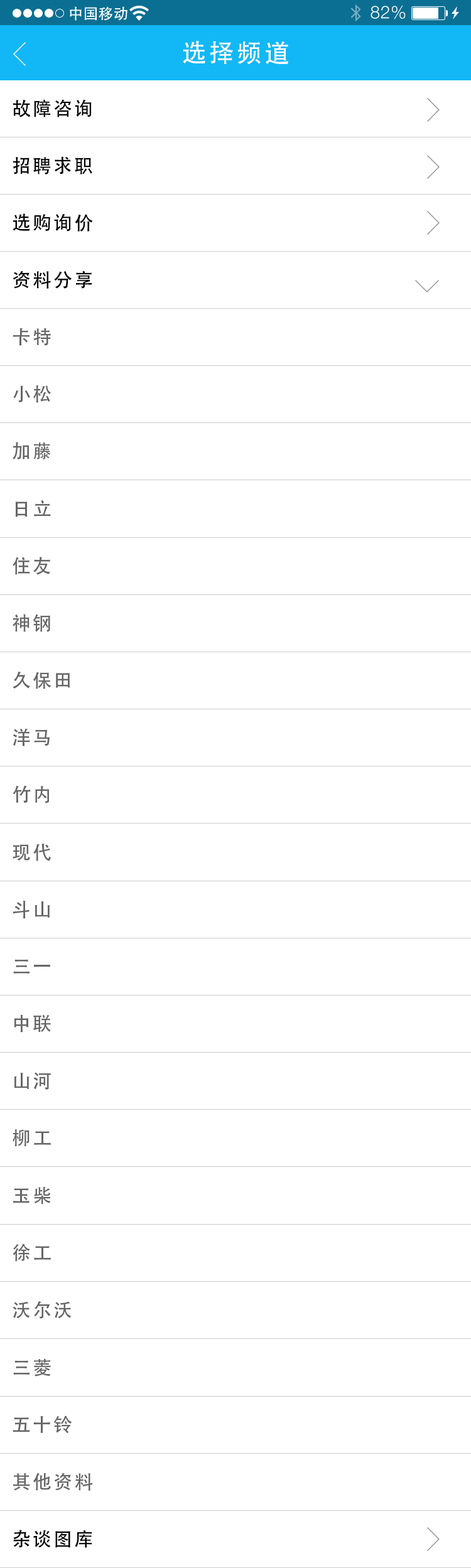
<style>
.page{position:relative;width:471px;height:1568px;background:#ffffff}
.page>*{position:absolute;margin:0}
.t1{font:25.1px "AdobeHeitiStd-Regular";letter-spacing:0.104em;color:#ffffff}
.t2{font:18.8px "AdobeHeitiStd-Regular";letter-spacing:0.104em;color:#000000}
.t3{font:18.8px "AdobeHeitiStd-Regular";letter-spacing:0.104em;color:#666666}
</style>
<div class="page">
<p class="t1" style="left:183px;top:41px;width:105px;height:24px">选择频道</p>
<p class="t2" style="left:13px;top:99px;width:79px;height:18px">故障咨询</p>
<p class="t2" style="left:13px;top:156px;width:79px;height:19px">招聘求职</p>
<p class="t2" style="left:13px;top:213px;width:80px;height:19px">选购询价</p>
<p class="t2" style="left:13px;top:271px;width:79px;height:18px">资料分享</p>
<p class="t3" style="left:13px;top:328px;width:38px;height:18px">卡特</p>
<p class="t3" style="left:13px;top:385px;width:38px;height:18px">小松</p>
<p class="t3" style="left:13px;top:442px;width:38px;height:17px">加藤</p>
<p class="t3" style="left:15px;top:500px;width:36px;height:17px">日立</p>
<p class="t3" style="left:13px;top:557px;width:37px;height:18px">住友</p>
<p class="t3" style="left:13px;top:614px;width:37px;height:18px">神钢</p>
<p class="t3" style="left:13px;top:671px;width:57px;height:18px">久保田</p>
<p class="t3" style="left:13px;top:728px;width:37px;height:18px">洋马</p>
<p class="t3" style="left:13px;top:785px;width:37px;height:18px">竹内</p>
<p class="t3" style="left:13px;top:844px;width:38px;height:17px">现代</p>
<p class="t3" style="left:13px;top:901px;width:37px;height:17px">斗山</p>
<p class="t3" style="left:13px;top:959px;width:37px;height:15px">三一</p>
<p class="t3" style="left:14px;top:1014px;width:37px;height:19px">中联</p>
<p class="t3" style="left:14px;top:1072px;width:37px;height:18px">山河</p>
<p class="t3" style="left:13px;top:1129px;width:38px;height:18px">柳工</p>
<p class="t3" style="left:13px;top:1186px;width:38px;height:19px">玉柴</p>
<p class="t3" style="left:13px;top:1243px;width:38px;height:19px">徐工</p>
<p class="t3" style="left:13px;top:1301px;width:59px;height:18px">沃尔沃</p>
<p class="t3" style="left:13px;top:1358px;width:38px;height:19px">三菱</p>
<p class="t3" style="left:13px;top:1415px;width:59px;height:19px">五十铃</p>
<p class="t3" style="left:13px;top:1473px;width:80px;height:18px">其他资料</p>
<p class="t2" style="left:13px;top:1530px;width:79px;height:18px">杂谈图库</p>
</div>
